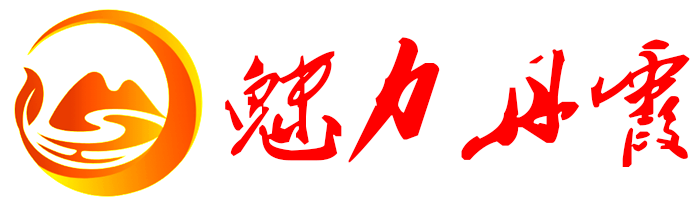
<style>
.page{position:relative;width:698px;height:205px;background:#ffffff}
.page>*{position:absolute;margin:0}
.t1{font:121px "²ÝÌ´Õ«Ã«Ôó¶«×ÖÌå";color:#ff0000}
</style>
<div class="page">
<p class="t1" style="left:225px;top:37px;width:465px;height:130px">魅力丹霞</p>
</div>
